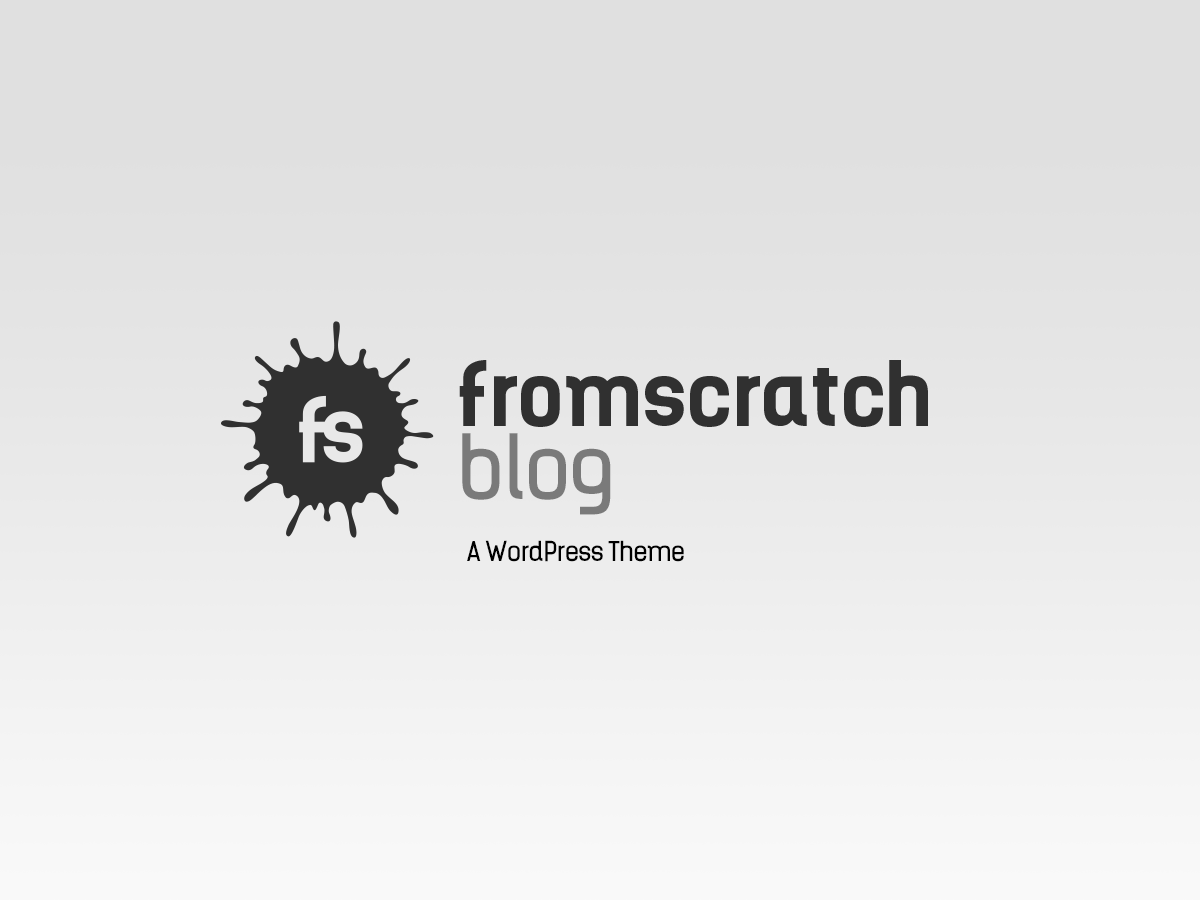
<style>
.page{position:relative;width:1200px;height:900px}
.page>*{position:absolute;margin:0}
.t1{font:85.2px "KelsonRegular";color:#7a7a7a}
.t2{font:26.2px "KelsonRegular";color:#000000}
</style>
<div class="page">
<p class="t1" style="left:462px;top:433px;width:149px;height:82px">blog</p>
<p class="t2" style="left:467px;top:540px;width:217px;height:22px">A WordPress Theme</p>
</div>
